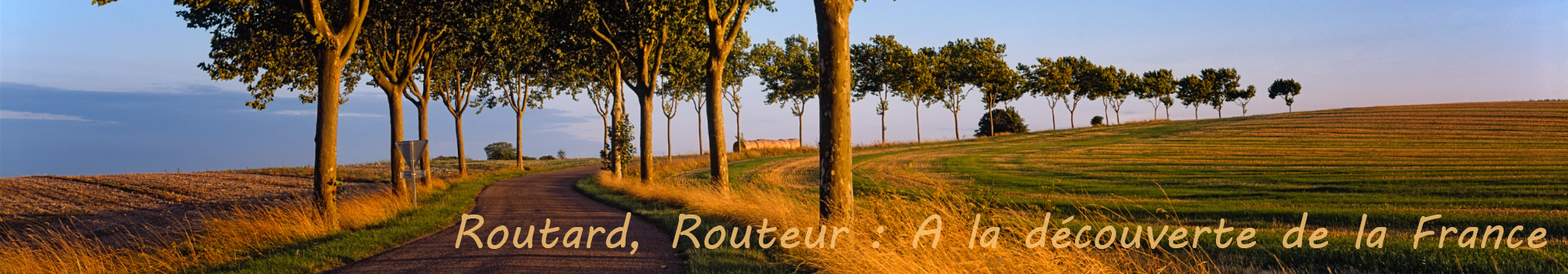
<style>
.page{position:relative;width:1568px;height:274px}
.page>*{position:absolute;margin:0}
.t1{font:47px "MVBoli";color:#ddae64}
</style>
<div class="page">
<p class="t1" style="left:455px;top:212px;width:1092px;height:43px">Routard, Routeur : A la découverte de la France</p>
</div>
